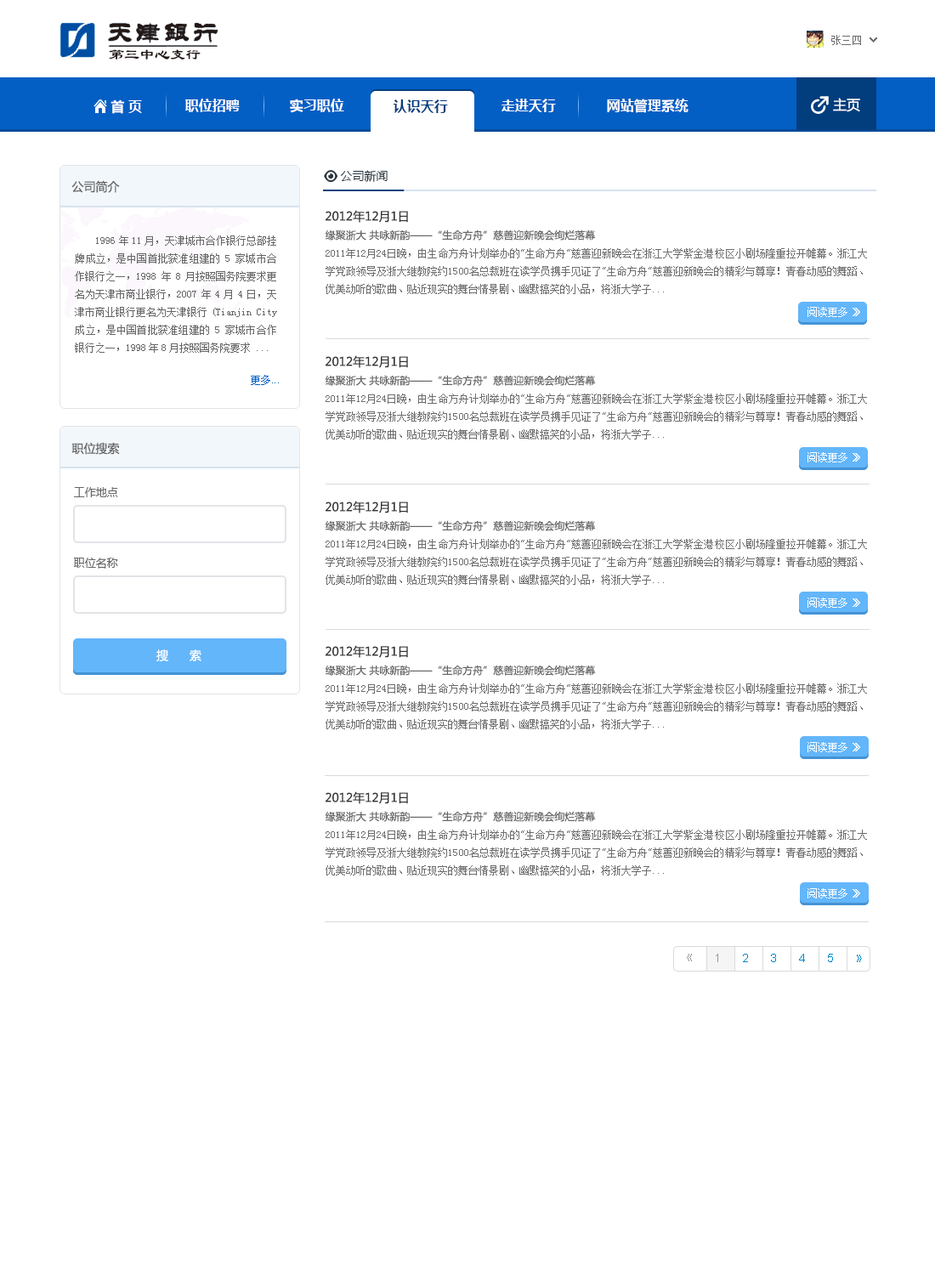
<style>
.page{position:relative;width:935px;height:1275px;background:#ffffff}
.page>*{position:absolute;margin:0}
.t1{font:10.2px "SimSun";color:#6c6c6c}
.t2{font:15.3px "LiSu";color:#241814}
.t3{font:13.6px "MicrosoftYaHei-Bold";color:#ffffff}
.t4{font:13.6px "MicrosoftYaHei-Bold";color:#023d7d}
.t5{font:13.6px "MicrosoftYaHei";color:#ffffff}
.t6{font:11.9px "MicrosoftYaHei";color:#29353f}
.t7{font:11.9px "MicrosoftYaHei";color:#666666}
.t8{font:11.9px "MicrosoftYaHei";color:#333333}
.t9{font:10.2px "MicrosoftYaHei";color:#666666}
.t10{font:10.2px/17.9px "SimSun";color:#666666}
.t11{font:10.2px "SimSun";color:#ffffff}
.t12{font:8.5px "MicrosoftYaHei";color:#ffffff;scale:2.24 1}
.t13{font:10.2px "ArialMT";color:#035fc4}
.t14{font:10.2px "SimSun";color:#035fc4}
.t15{font:11.1px "MicrosoftYaHei";color:#666666}
.t16{font:11.9px "MicrosoftYaHei";color:#ffffff;text-transform:uppercase}
.t17{font:11.9px "ArialMT";letter-spacing:1.8em;color:#0088cc}
.t18{font:11.1px "SimSun";letter-spacing:1.8em;color:#999999}
.t19{font:11.9px "ArialMT";letter-spacing:1.8em;color:#999999}
.t20{font:10.2px "SimSun";letter-spacing:1.8em;color:#0088cc}
</style>
<div class="page">
<p class="t1" style="left:831px;top:35px;width:30px;height:10px">张三四</p>
<p class="t2" style="left:109px;top:49px;width:92px;height:11px">第三中心支行</p>
<p class="t3" style="left:111px;top:99px;width:31px;height:15px">首 页</p>
<p class="t3" style="left:185px;top:99px;width:55px;height:13px">职位招聘</p>
<p class="t3" style="left:290px;top:99px;width:54px;height:14px">实习职位</p>
<p class="t4" style="left:394px;top:99px;width:54px;height:14px">认识天行</p>
<p class="t3" style="left:502px;top:99px;width:54px;height:13px">走进天行</p>
<p class="t3" style="left:607px;top:99px;width:82px;height:14px">网站管理系统</p>
<p class="t5" style="left:833px;top:98px;width:27px;height:14px">主页</p>
<p class="t6" style="left:340px;top:170px;width:48px;height:12px">公司新闻</p>
<p class="t7" style="left:71px;top:180px;width:49px;height:13px">公司简介</p>
<p class="t8" style="left:326px;top:210px;width:82px;height:13px">2012年12月1日</p>
<p class="t9" style="left:326px;top:230px;width:270px;height:11px">缘聚浙大 共咏新韵——“生命方舟”慈善迎新晚会绚烂落幕</p>
<p class="t10" style="left:75px;top:235px;width:202px;height:118px;text-align:justify">1996年11月，天津城市合作银行总部挂牌成立，是中国首批获准组建的5家城市合作银行之一，1998年8月按照国务院要求更名为天津市商业银行，2007年4月4日，天津市商业银行更名为天津银行(Tianjin City成立，是中国首批获准组建的5家城市合作银行之一，1998年8月按照国务院要求 ...</p>
<p class="t1" style="left:326px;top:248px;width:541px;height:46px;text-align:justify">2011年12月24日晚，由生命方舟计划举办的"生命方舟"慈善迎新晚会在浙江大学紫金港校区小剧场隆重拉开帷幕。浙江大学党政领导及浙大继教院约1500名总裁班在读学员携手见证了"生命方舟"慈善迎新晚会的精彩与尊享！青春动感的舞蹈、优美动听的歌曲、贴近现实的舞台情景剧、幽默搞笑的小品，将浙大学子...</p>
<p class="t11" style="left:808px;top:307px;width:40px;height:10px">阅读更多</p>
<p class="t12" style="left:853px;top:308px;width:7px;height:8px">》</p>
<p class="t8" style="left:326px;top:355px;width:82px;height:13px">2012年12月1日</p>
<p class="t13" style="left:251px;top:375px;width:28px;height:10px"><span class="t14">更多</span>...</p>
<p class="t9" style="left:326px;top:375px;width:270px;height:11px">缘聚浙大 共咏新韵——“生命方舟”慈善迎新晚会绚烂落幕</p>
<p class="t1" style="left:326px;top:394px;width:541px;height:46px;text-align:justify">2011年12月24日晚，由生命方舟计划举办的"生命方舟"慈善迎新晚会在浙江大学紫金港校区小剧场隆重拉开帷幕。浙江大学党政领导及浙大继教院约1500名总裁班在读学员携手见证了"生命方舟"慈善迎新晚会的精彩与尊享！青春动感的舞蹈、优美动听的歌曲、贴近现实的舞台情景剧、幽默搞笑的小品，将浙大学子...</p>
<p class="t7" style="left:71px;top:442px;width:49px;height:13px">职位搜索</p>
<p class="t11" style="left:808px;top:452px;width:40px;height:10px">阅读更多</p>
<p class="t12" style="left:853px;top:453px;width:7px;height:9px">》</p>
<p class="t15" style="left:74px;top:487px;width:44px;height:10px">工作地点</p>
<p class="t8" style="left:326px;top:501px;width:82px;height:12px">2012年12月1日</p>
<p class="t9" style="left:326px;top:520px;width:270px;height:11px">缘聚浙大 共咏新韵——“生命方舟”慈善迎新晚会绚烂落幕</p>
<p class="t1" style="left:326px;top:539px;width:541px;height:46px;text-align:justify">2011年12月24日晚，由生命方舟计划举办的"生命方舟"慈善迎新晚会在浙江大学紫金港校区小剧场隆重拉开帷幕。浙江大学党政领导及浙大继教院约1500名总裁班在读学员携手见证了"生命方舟"慈善迎新晚会的精彩与尊享！青春动感的舞蹈、优美动听的歌曲、贴近现实的舞台情景剧、幽默搞笑的小品，将浙大学子...</p>
<p class="t15" style="left:73px;top:558px;width:45px;height:11px">职位名称</p>
<p class="t11" style="left:808px;top:598px;width:40px;height:10px">阅读更多</p>
<p class="t12" style="left:853px;top:598px;width:7px;height:9px">》</p>
<p class="t16" style="left:156px;top:649px;width:45px;height:12px">搜      索</p>
<p class="t8" style="left:326px;top:645px;width:82px;height:13px">2012年12月1日</p>
<p class="t9" style="left:326px;top:665px;width:270px;height:11px">缘聚浙大 共咏新韵——“生命方舟”慈善迎新晚会绚烂落幕</p>
<p class="t1" style="left:326px;top:683px;width:541px;height:46px;text-align:justify">2011年12月24日晚，由生命方舟计划举办的"生命方舟"慈善迎新晚会在浙江大学紫金港校区小剧场隆重拉开帷幕。浙江大学党政领导及浙大继教院约1500名总裁班在读学员携手见证了"生命方舟"慈善迎新晚会的精彩与尊享！青春动感的舞蹈、优美动听的歌曲、贴近现实的舞台情景剧、幽默搞笑的小品，将浙大学子...</p>
<p class="t11" style="left:808px;top:742px;width:40px;height:10px">阅读更多</p>
<p class="t12" style="left:853px;top:743px;width:7px;height:8px">》</p>
<p class="t8" style="left:326px;top:791px;width:82px;height:13px">2012年12月1日</p>
<p class="t9" style="left:326px;top:811px;width:270px;height:11px">缘聚浙大 共咏新韵——“生命方舟”慈善迎新晚会绚烂落幕</p>
<p class="t1" style="left:326px;top:830px;width:541px;height:46px;text-align:justify">2011年12月24日晚，由生命方舟计划举办的"生命方舟"慈善迎新晚会在浙江大学紫金港校区小剧场隆重拉开帷幕。浙江大学党政领导及浙大继教院约1500名总裁班在读学员携手见证了"生命方舟"慈善迎新晚会的精彩与尊享！青春动感的舞蹈、优美动听的歌曲、贴近现实的舞台情景剧、幽默搞笑的小品，将浙大学子...</p>
<p class="t11" style="left:808px;top:888px;width:40px;height:11px">阅读更多</p>
<p class="t12" style="left:853px;top:889px;width:7px;height:9px">》</p>
<p class="t17" style="left:687px;top:954px;width:175px;height:8px"><span class="t18">《</span><span class="t19">1</span>2345<span class="t20">》</span></p>
</div>
